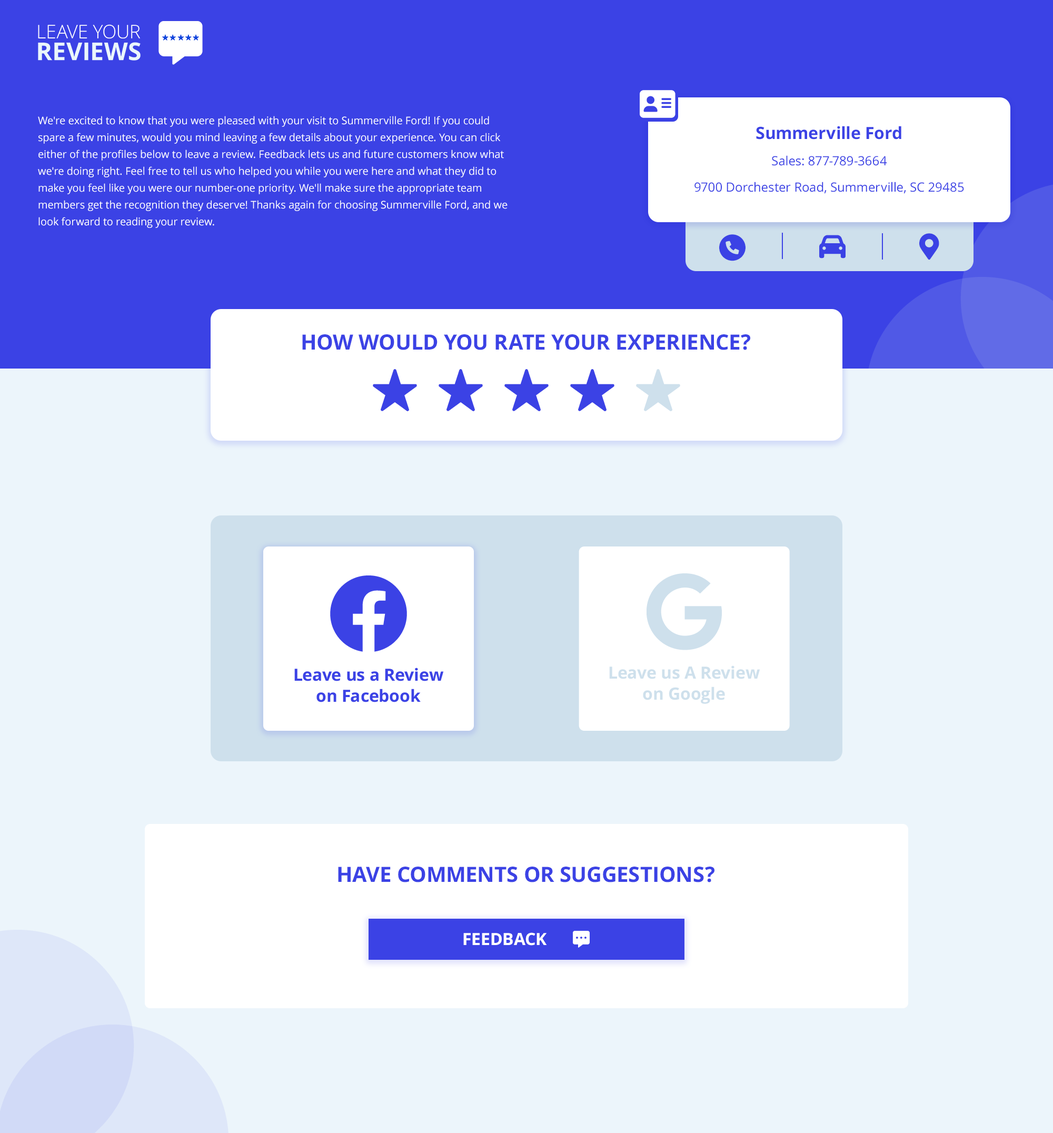
<style>
.page{position:relative;width:1053px;height:1133px;background:#ecf5fb}
.page>*{position:absolute;margin:0}
.t1{font:10.5px/16.8px "OpenSans";color:#ffffff}
.t2{font:16.8px "OpenSans-Bold";color:#3b42e5}
.t3{font:12.6px "OpenSans";color:#3b42e5}
.t4{font:21.1px "OpenSans-Bold";color:#3b42e5;text-transform:uppercase}
.t5{font:16.8px/21.1px "OpenSans-Bold";color:#cee0ec}
.t6{font:16.8px/21.1px "OpenSans-Bold";color:#3b42e5}
.t7{font:16.8px "OpenSans-Bold";color:#ffffff;text-transform:uppercase}
</style>
<div class="page">
<p class="t1" style="left:38px;top:116px;width:469px;height:112px">We're excited to know that you were pleased with your visit to Summerville Ford! If you could spare a few minutes, would you mind leaving a few details about your experience. You can click either of the profiles below to leave a review. Feedback lets us and future customers know what we're doing right. Feel free to tell us who helped you while you were here and what they did to make you feel like you were our number-one priority. We'll make sure the appropriate team members get the recognition they deserve! Thanks again for choosing Summerville Ford, and we look forward to reading your review.</p>
<p class="t2" style="left:756px;top:126px;width:145px;height:13px">Summerville Ford</p>
<p class="t3" style="left:772px;top:155px;width:115px;height:11px">Sales: 877-789-3664</p>
<p class="t3" style="left:694px;top:182px;width:270px;height:12px">9700 Dorchester Road, Summerville, SC 29485</p>
<p class="t4" style="left:302px;top:334px;width:448px;height:16px">How would you rate your experience?</p>
<p class="t5" style="left:609px;top:665px;width:151px;height:39px;text-align:center">Leave us A Review<br>on Google</p>
<p class="t6" style="left:294px;top:667px;width:150px;height:35px;text-align:center">Leave us a Review<br>on Facebook</p>
<p class="t4" style="left:338px;top:866px;width:376px;height:16px">Have comments or suggestions?</p>
<p class="t7" style="left:463px;top:932px;width:84px;height:13px">feedback</p>
</div>
